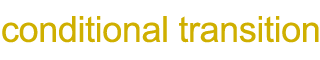
<style>
.page{position:relative;width:320px;height:60px;background:#ffffff}
.page>*{position:absolute;margin:0}
.t1{font:36px "ArialMT";letter-spacing:-0.011em;color:#cfaf00}
</style>
<div class="page">
<p class="t1" style="left:2px;top:16px;width:317px;height:27px">conditional transition</p>
</div>
